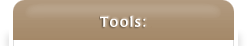
<style>
.page{position:relative;width:247px;height:46px}
.page>*{position:absolute;margin:0}
.t1{font:14px "LaudatioC";letter-spacing:0.1em;color:#ffffff}
</style>
<div class="page">
<p class="t1" style="left:100px;top:16px;width:46px;height:11px">Tools:</p>
</div>
